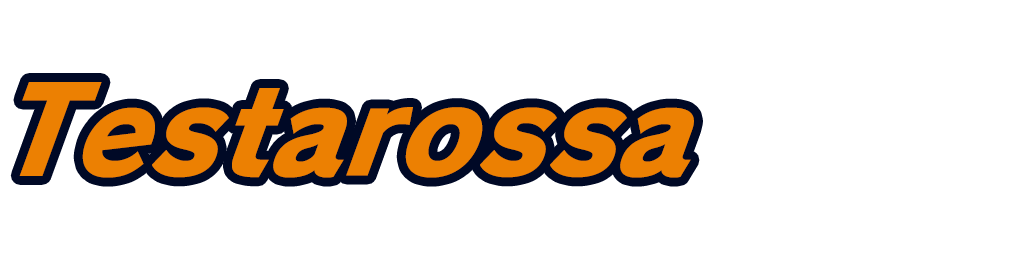
<style>
.page{position:relative;width:1024px;height:256px;background:#ffffff}
.page>*{position:absolute;margin:0}
.t1{font:128px "RodinPro-EB";letter-spacing:0.001em;color:#ec8002;scale:0.94 1}
</style>
<div class="page">
<p class="t1" style="left:19px;top:82px;width:675px;height:96px">Testarossa</p>
</div>
